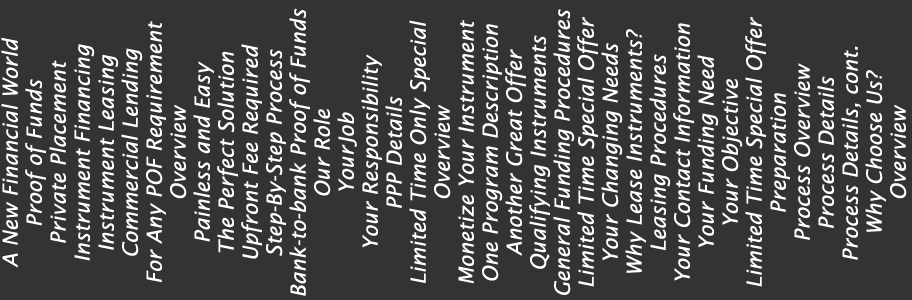
<style>
.page{position:relative;width:912px;height:300px;background:#333333}
.page>*{position:absolute;margin:0}
.t1{font:21px/24px "LucidaSans-Italic";color:#ffffff}
</style>
<div class="page">
<p class="t1" style="left:1px;top:8px;width:906px;height:288px;text-align:center;rotate:-90deg">A New Financial World<br>Proof of Funds<br>Private Placement <br>Instrument Financing<br>Instrument Leasing<br>Commercial Lending<br>For Any POF Requirement<br>Overview<br>Painless and Easy<br>The Perfect Solution<br>Upfront Fee Required<br>Step-By-Step Process<br>Bank-to-bank Proof of Funds<br>Our Role<br>YourJob<br>Your Responsibility<br>PPP Details<br>Limited Time Only Special<br>Overview<br>Monetize Your Instrument<br>One Program Description<br>Another Great Offer<br>Qualifying Instruments<br>General Funding Procedures<br>Limited Time Special Offer<br>Your Changing Needs<br>Why Lease Instruments?<br>Leasing Procedures<br>Your Contact Information<br>Your Funding Need<br>Your Objective<br>Limited Time Special Offer<br>Preparation<br>Process Overview<br>Process Details<br>Process Details, cont.<br>Why Choose Us?<br>Overview</p>
</div>
